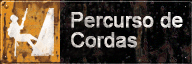
<style>
.page{position:relative;width:192px;height:64px}
.page>*{position:absolute;margin:0}
.t1{font:20.7px/20px "ArialMT";font-weight:bold;scale:0.96 1}
</style>
<div class="page">
<p class="t1" style="left:71px;top:12px;width:112px;height:36px">Percurso de <br>Cordas</p>
</div>
